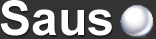
<style>
.page{position:relative;width:156px;height:39px;background:#333333}
.page>*{position:absolute;margin:0}
.t1{font:48px "Arial-BoldMT";color:#ffffff}
</style>
<div class="page">
<p class="t1" style="left:0px;top:0px;width:112px;height:36px">Saus</p>
</div>
